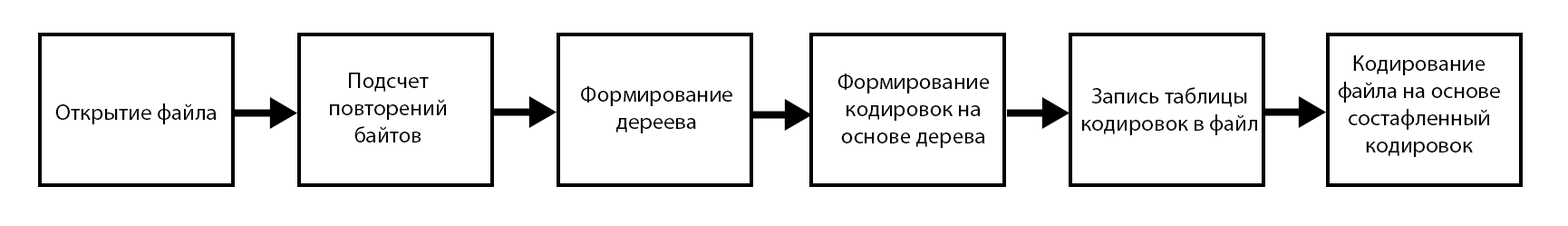
<style>
.page{position:relative;width:1568px;height:226px;background:#ffffff}
.page>*{position:absolute;margin:0}
.t1{font:22.7px "MyriadPro-Regular";color:#000000}
</style>
<div class="page">
<p class="t1" style="left:1338px;top:55px;width:162px;height:102px;text-align:center">Кодирование файла на основе состафленный кодировок</p>
<p class="t1" style="left:330px;top:73px;width:116px;height:69px;text-align:center">Подсчет повторений<br>байтов</p>
<p class="t1" style="left:837px;top:73px;width:153px;height:75px;text-align:center">Формирование кодировок на основе дерева</p>
<p class="t1" style="left:581px;top:86px;width:151px;height:47px;text-align:center">Формирование дереева</p>
<p class="t1" style="left:1082px;top:87px;width:175px;height:48px;text-align:center">Запись таблицы кодировок в файл</p>
<p class="t1" style="left:55px;top:103px;width:162px;height:21px">Открытие файла</p>
</div>
